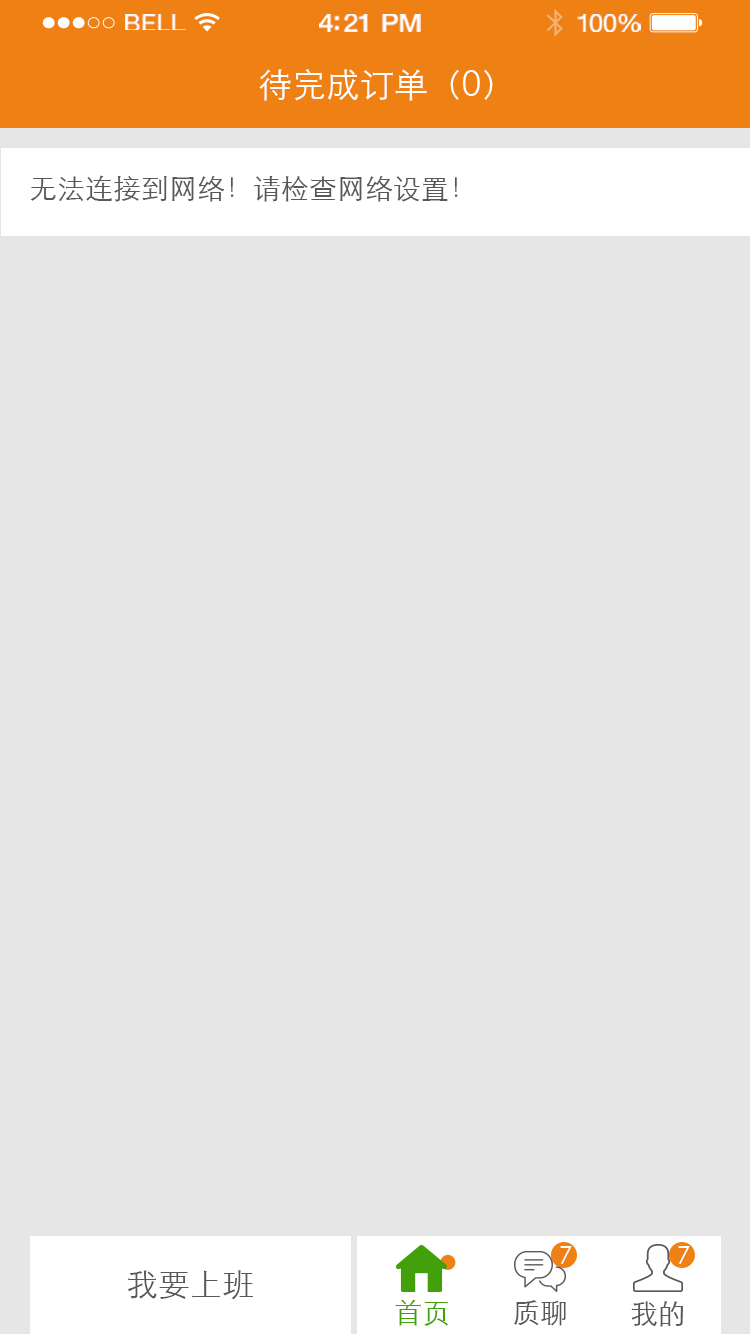
<style>
.page{position:relative;width:750px;height:1334px;background:#e6e6e6}
.page>*{position:absolute;margin:0}
.t1{font:23.3px "HelveticaNeue";letter-spacing:0.02em;color:#ffffff;scale:1.06 1}
.t2{font:25.3px "HelveticaNeue-Medium";letter-spacing:-0.02em;color:#ffffff;scale:1.06 1}
.t3{font:24.3px "HelveticaNeue";letter-spacing:-0.02em;color:#ffffff;scale:1.06 1}
.t4{font:34px "STXihei";color:#ffffff}
.t5{font:28px "STXihei";color:#595757}
.t6{font:24px "STXihei";color:#ffffff}
.t7{font:32px "STXihei";color:#595757}
.t8{font:28px "STXihei";color:#42a00a}
</style>
<div class="page">
<p class="t1" style="left:125px;top:14px;width:61px;height:16px">BELL</p>
<p class="t2" style="left:319px;top:14px;width:102px;height:18px">4:21 PM</p>
<p class="t3" style="left:577px;top:14px;width:64px;height:18px">100%</p>
<p class="t4" style="left:259px;top:69px;width:234px;height:32px">待完成订单（0）</p>
<p class="t5" style="left:30px;top:175px;width:428px;height:27px">无法连接到网络！请检查网络设置！</p>
<p class="t6" style="left:560px;top:1246px;width:12px;height:18px">7</p>
<p class="t6" style="left:678px;top:1246px;width:12px;height:18px">7</p>
<p class="t7" style="left:128px;top:1270px;width:125px;height:30px">我要上班</p>
<p class="t8" style="left:395px;top:1299px;width:53px;height:27px">首页</p>
<p class="t5" style="left:514px;top:1300px;width:52px;height:26px">质聊</p>
<p class="t5" style="left:631px;top:1301px;width:53px;height:26px">我的</p>
</div>
